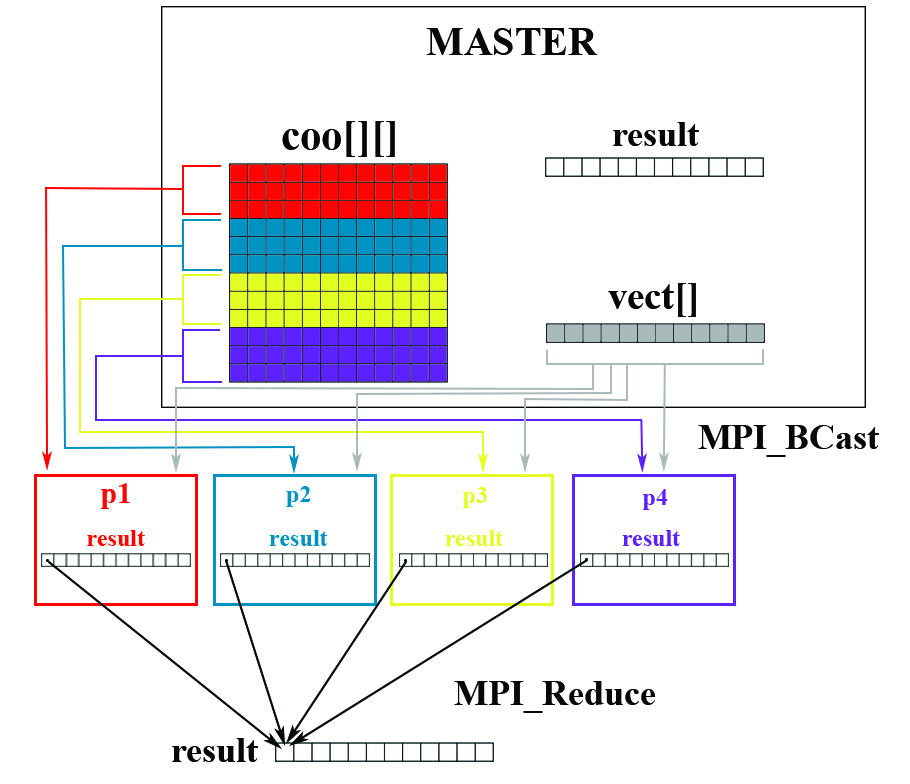
<style>
.page{position:relative;width:910px;height:784px;background:#ffffff}
.page>*{position:absolute;margin:0}
.t1{font:39.6px "TimesNewRomanPS-BoldMT";color:#060808}
.t2{font:42.2px "TimesNewRomanPS-BoldMT";color:#060808}
.t3{font:36px "TimesNewRomanPS-BoldMT";color:#060808}
.t4{font:30px "TimesNewRomanPS-BoldMT";color:#ff0300}
.t5{font:24px "TimesNewRomanPS-BoldMT";color:#e3ff21}
.t6{font:24px "TimesNewRomanPS-BoldMT";color:#5b21ff}
.t7{font:24px "TimesNewRomanPS-BoldMT";color:#ff0300}
.t8{font:23.7px "TimesNewRomanPS-BoldMT";color:#0092c3}
</style>
<div class="page">
<p class="t1" style="left:426px;top:28px;width:172px;height:27px">MASTER</p>
<p class="t2" style="left:282px;top:121px;width:113px;height:36px">coo[][]</p>
<p class="t3" style="left:613px;top:122px;width:86px;height:24px">result</p>
<p class="t3" style="left:698px;top:425px;width:181px;height:32px">MPI_BCast</p>
<p class="t4" style="left:101px;top:483px;width:29px;height:26px">p1</p>
<p class="t5" style="left:463px;top:487px;width:24px;height:21px">p3</p>
<p class="t6" style="left:643px;top:489px;width:25px;height:21px">p4</p>
<p class="t7" style="left:87px;top:530px;width:58px;height:16px">result</p>
<p class="t8" style="left:269px;top:530px;width:59px;height:16px">result</p>
<p class="t5" style="left:445px;top:530px;width:58px;height:16px">result</p>
<p class="t6" style="left:622px;top:530px;width:58px;height:16px">result</p>
<p class="t3" style="left:454px;top:681px;width:202px;height:32px">MPI_Reduce</p>
<p class="t3" style="left:172px;top:738px;width:86px;height:24px">result</p>
</div>
